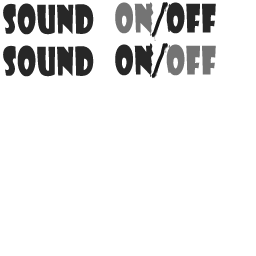
<style>
.page{position:relative;width:256px;height:256px;background:#ffffff}
.page>*{position:absolute;margin:0}
.t1{font:38px "ShowcardGothic-Reg";letter-spacing:0.04em;color:#272727;scale:0.7 1}
.t2{font:38px "ShowcardGothic-Reg";letter-spacing:0.04em;color:#747474;scale:0.7 1}
</style>
<div class="page">
<p class="t1" style="left:3px;top:3px;width:91px;height:32px">SOUND</p>
<p class="t2" style="left:115px;top:2px;width:36px;height:32px">ON</p>
<p class="t1" style="left:166px;top:2px;width:50px;height:32px">off</p>
<p class="t1" style="left:3px;top:45px;width:91px;height:32px">SOUND</p>
<p class="t1" style="left:115px;top:44px;width:36px;height:32px">ON</p>
<p class="t2" style="left:166px;top:44px;width:50px;height:32px">off</p>
</div>
